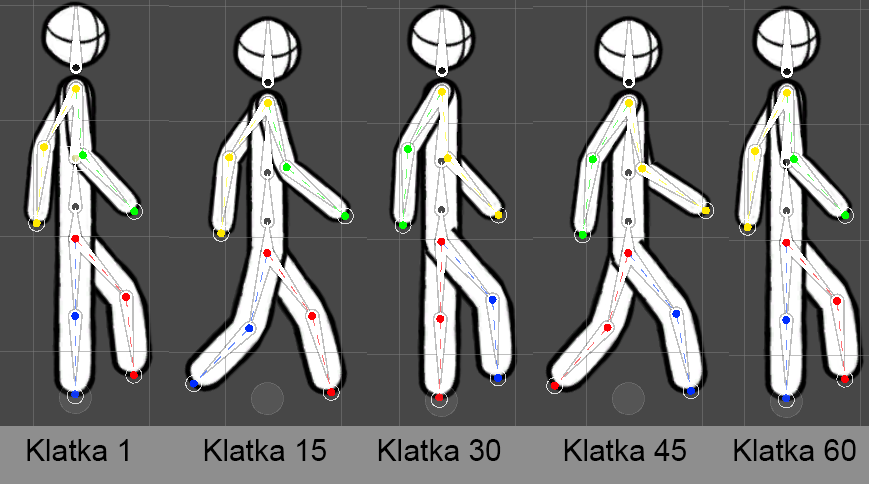
<style>
.page{position:relative;width:869px;height:484px;background:#474747}
.page>*{position:absolute;margin:0}
.t1{font:30px "ArialMT";color:#000000}
</style>
<div class="page">
<p class="t1" style="left:27px;top:439px;width:829px;height:22px">Klatka 1        Klatka 15    Klatka 30        Klatka 45  Klatka 60</p>
</div>
